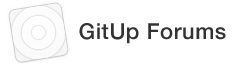
<style>
.page{position:relative;width:244px;height:66px;background:#ffffff}
.page>*{position:absolute;margin:0}
.t1{font:22px "HelveticaNeue-Medium";letter-spacing:0.025em;color:#333333}
</style>
<div class="page">
<p class="t1" style="left:79px;top:23px;width:147px;height:21px">GitUp Forums</p>
</div>
